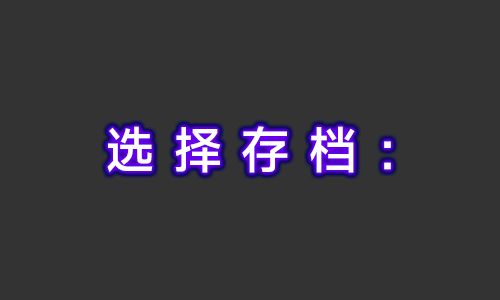
<style>
.page{position:relative;width:500px;height:300px;background:#333333}
.page>*{position:absolute;margin:0}
.t1{font:50px "MiSans-Medium";letter-spacing:0.35em;color:#ffffff}
</style>
<div class="page">
<p class="t1" style="left:107px;top:126px;width:284px;height:47px">选择存档：</p>
</div>
